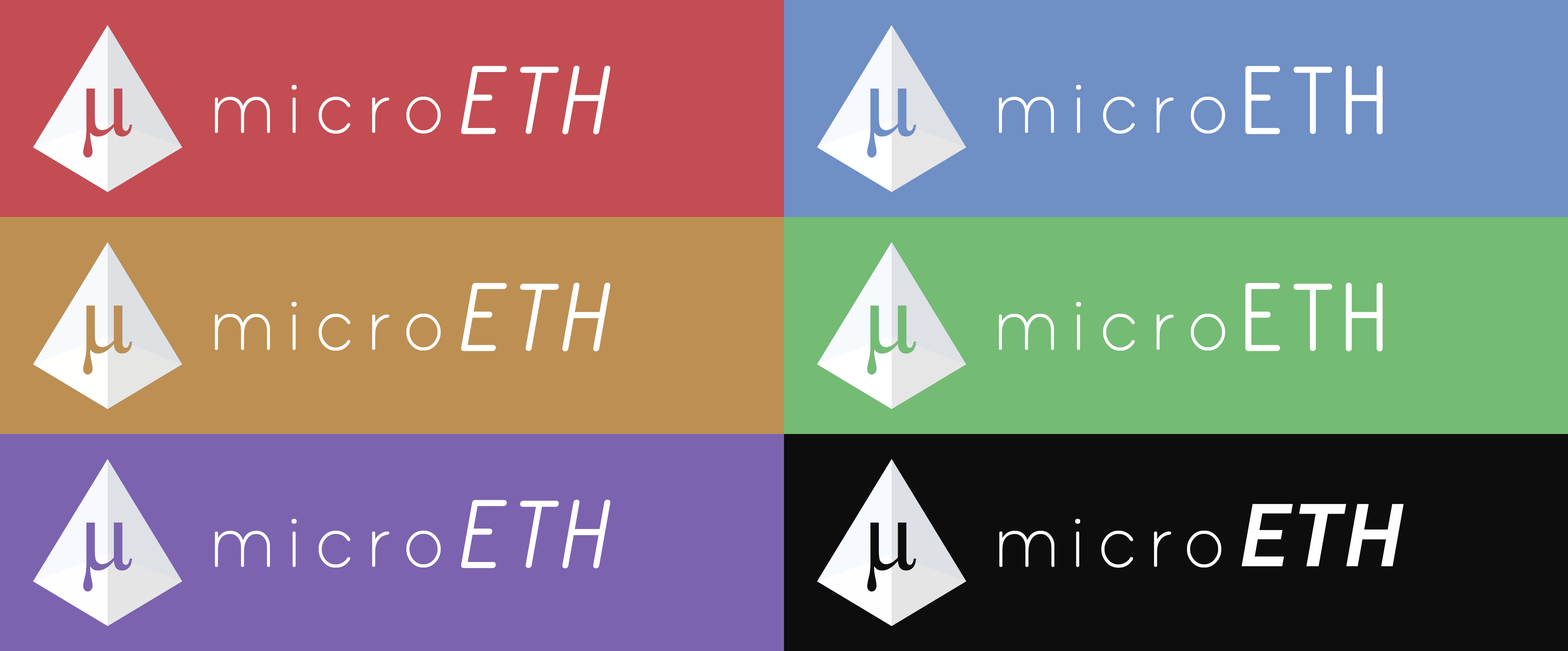
<style>
.page{position:relative;width:1568px;height:651px}
.page>*{position:absolute;margin:0}
.t1{font:105.9px "PrintClearly";letter-spacing:0.075em;color:#ffffff}
.t2{font:105.9px "PrintClearly";color:#ffffff;font-weight:bold;font-style:italic}
.t3{font:105.9px "PrintClearly";color:#ffffff;font-weight:bold}
.t4{font:93.2px "FranklinGothic-Medium";letter-spacing:0.05em;color:#ffffff;font-style:italic}
</style>
<div class="page">
<p class="t1" style="left:215px;top:66px;width:395px;height:68px">micro<span class="t2">ETH</span></p>
<p class="t1" style="left:999px;top:66px;width:384px;height:68px">micro<span class="t3">ETH</span></p>
<p class="t1" style="left:215px;top:283px;width:395px;height:68px">micro<span class="t2">ETH</span></p>
<p class="t1" style="left:999px;top:283px;width:384px;height:68px">micro<span class="t3">ETH</span></p>
<p class="t1" style="left:215px;top:500px;width:395px;height:68px">micro<span class="t2">ETH</span></p>
<p class="t1" style="left:999px;top:504px;width:405px;height:64px">micro<span class="t4">ETH</span></p>
</div>
